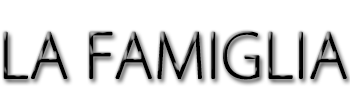
<style>
.page{position:relative;width:350px;height:100px;background:#ffffff}
.page>*{position:absolute;margin:0}
.t1{font:60px "KozGoPr6N-ExtraLight";letter-spacing:-0.005em;color:#000000;text-transform:uppercase;font-weight:bold}
</style>
<div class="page">
<p class="t1" style="left:3px;top:31px;width:344px;height:49px">la famiglia</p>
</div>
